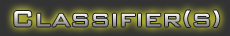
<style>
.page{position:relative;width:230px;height:36px}
.page>*{position:absolute;margin:0}
.t1{font:30px "BankGothicBT-Medium"}
</style>
<div class="page">
<p class="t1" style="left:14px;top:10px;width:206px;height:17px">Classifier(s)</p>
</div>
